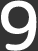
<style>
.page{position:relative;width:38px;height:51px;background:#333333}
.page>*{position:absolute;margin:0}
.t1{font:66.7px "RoundedMplus1c-Medium";color:#ffffff}
</style>
<div class="page">
<p class="t1" style="left:1px;top:0px;width:36px;height:51px">9</p>
</div>
